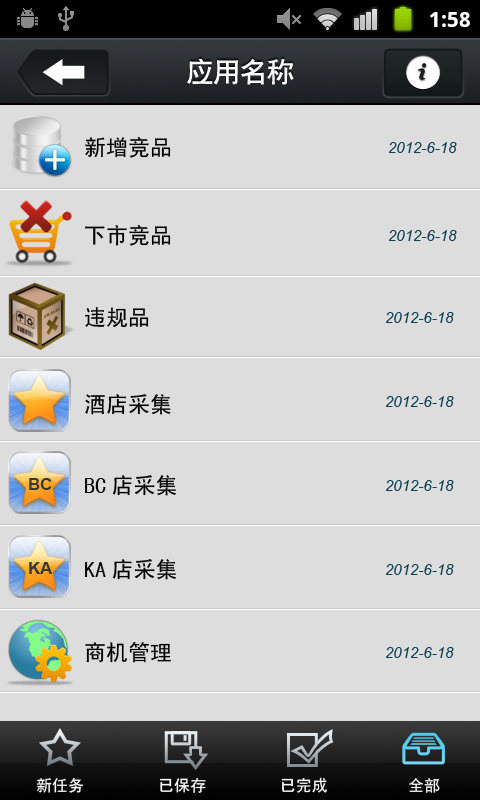
<style>
.page{position:relative;width:480px;height:800px;background:#dddddd}
.page>*{position:absolute;margin:0}
.t1{font:27px "CTCuHeiSJ";color:#ffffff}
.t2{font:22px "SimHei";color:#000000}
.t3{font:15px "Arial-ItalicMT";color:#0e4054}
.t4{font:16.7px "Arial-BoldMT";color:#373737}
.t5{font:16px "SimHei";color:#ffffff}
</style>
<div class="page">
<p class="t1" style="left:187px;top:58px;width:107px;height:27px">应用名称</p>
<p class="t2" style="left:85px;top:137px;width:86px;height:21px">新增竞品</p>
<p class="t3" style="left:388px;top:142px;width:69px;height:11px">2012-6-18</p>
<p class="t2" style="left:85px;top:225px;width:86px;height:21px">下市竞品</p>
<p class="t3" style="left:388px;top:230px;width:69px;height:11px">2012-6-18</p>
<p class="t2" style="left:85px;top:307px;width:64px;height:21px">违规品</p>
<p class="t3" style="left:385px;top:312px;width:69px;height:11px">2012-6-18</p>
<p class="t2" style="left:85px;top:394px;width:86px;height:21px">酒店采集</p>
<p class="t3" style="left:385px;top:396px;width:69px;height:11px">2012-6-18</p>
<p class="t4" style="left:29px;top:478px;width:23px;height:12px">BC</p>
<p class="t2" style="left:85px;top:475px;width:91px;height:21px">BC店采集</p>
<p class="t3" style="left:385px;top:480px;width:69px;height:11px">2012-6-18</p>
<p class="t4" style="left:29px;top:562px;width:23px;height:12px">KA</p>
<p class="t2" style="left:85px;top:559px;width:91px;height:21px">KA店采集</p>
<p class="t3" style="left:385px;top:564px;width:69px;height:11px">2012-6-18</p>
<p class="t2" style="left:85px;top:642px;width:86px;height:21px">商机管理</p>
<p class="t3" style="left:385px;top:647px;width:69px;height:11px">2012-6-18</p>
<p class="t5" style="left:36px;top:778px;width:47px;height:15px">新任务</p>
<p class="t5" style="left:160px;top:778px;width:46px;height:15px">已保存</p>
<p class="t5" style="left:281px;top:777px;width:46px;height:16px">已完成</p>
<p class="t5" style="left:409px;top:778px;width:31px;height:15px">全部</p>
</div>
